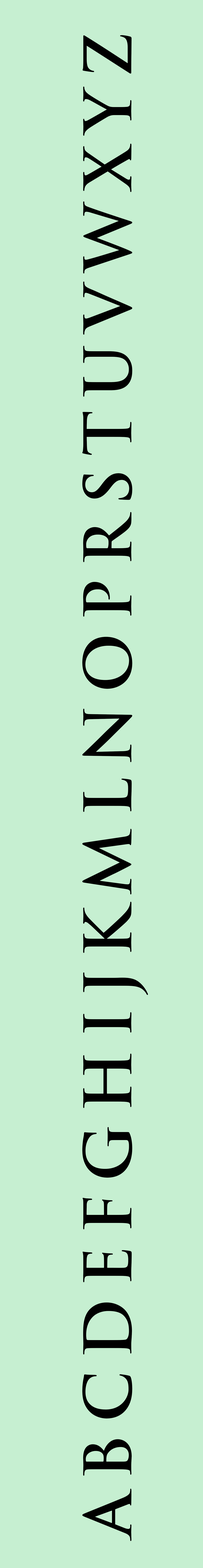
<style>
.page{position:relative;width:203px;height:1568px;background:#c6efd1}
.page>*{position:absolute;margin:0}
.t1{font:63.7px "TrajanPro-Bold";letter-spacing:0.2em;color:#000000}
</style>
<div class="page">
<p class="t1" style="left:82px;top:35px;width:66px;height:1506px;rotate:-90deg">ABCDEFGHIJKMLNOPRSTUVWXYZ</p>
</div>
